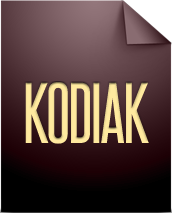
<style>
.page{position:relative;width:172px;height:213px}
.page>*{position:absolute;margin:0}
.t1{font:73px "SteelfishRg-Regular";letter-spacing:-0.02em;color:#ffea9f}
</style>
<div class="page">
<p class="t1" style="left:25px;top:82px;width:124px;height:62px">KODIAK</p>
</div>
